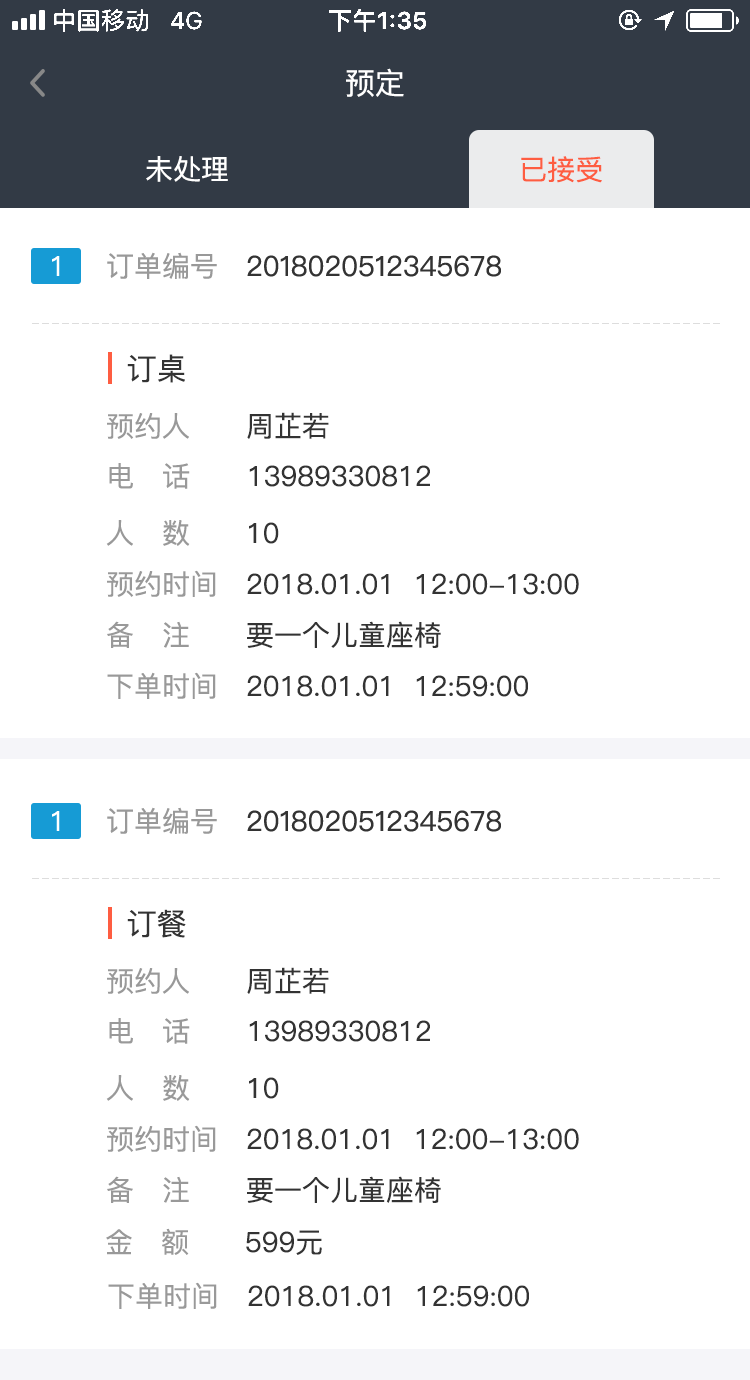
<style>
.page{position:relative;width:750px;height:1380px;background:#ffffff}
.page>*{position:absolute;margin:0}
.t1{font:30px "PingFang-SC-Medium";color:#ffffff}
.t2{font:28px "PingFang-SC-Medium";color:#ffffff}
.t3{font:28px "PingFang-SC-Medium";color:#fe5d41}
.t4{font:28px "PingFangSC-Regular";color:#ffffff}
.t5{font:28px "PingFangSC-Regular";color:#333333}
.t6{font:28px "PingFangSC-Regular";color:#999999}
.t7{font:30px "PingFang-SC-Medium";color:#333333}
.t8{font:28px/50px "PingFang-SC-Medium";color:#333333}
.t9{font:28px "PingFang-SC-Medium";color:#999999}
.t10{font:28px/50px "PingFang-SC-Medium";color:#999999}
.t11{font:28px "PingFang-SC-Medium";color:#333333}
</style>
<div class="page">
<p class="t1" style="left:346px;top:68px;width:58px;height:29px">预定</p>
<p class="t2" style="left:146px;top:156px;width:82px;height:26px">未处理</p>
<p class="t3" style="left:521px;top:156px;width:81px;height:27px">已接受</p>
<p class="t4" style="left:52px;top:256px;width:8px;height:20px">1</p>
<p class="t5" style="left:107px;top:252px;width:394px;height:27px"><span class="t6">订单编号   </span>2018020512345678</p>
<p class="t7" style="left:127px;top:354px;width:58px;height:29px">订桌</p>
<p class="t8" style="left:107px;top:412px;width:323px;height:77px"><span class="t9">     <br></span><span class="t10">预约人      </span>周芷若<br><span class="t10">电   话       </span>13989330812</p>
<p class="t9" style="left:106px;top:520px;width:173px;height:26px">人   数      <span class="t11">10</span></p>
<p class="t11" style="left:107px;top:570px;width:472px;height:27px"><span class="t9">预约时间   </span>2018.01.01  12:00-13:00</p>
<p class="t11" style="left:107px;top:621px;width:334px;height:27px"><span class="t9">备   注      </span>要一个儿童座椅</p>
<p class="t11" style="left:107px;top:672px;width:421px;height:27px"><span class="t9">下单时间   </span>2018.01.01  12:59:00</p>
<p class="t5" style="left:107px;top:807px;width:394px;height:27px"><span class="t6">订单编号   </span>2018020512345678</p>
<p class="t4" style="left:52px;top:811px;width:8px;height:20px">1</p>
<p class="t7" style="left:127px;top:909px;width:59px;height:29px">订餐</p>
<p class="t8" style="left:107px;top:967px;width:323px;height:77px"><span class="t9">     <br></span><span class="t10">预约人      </span>周芷若<br><span class="t10">电   话       </span>13989330812</p>
<p class="t9" style="left:106px;top:1075px;width:173px;height:26px">人   数      <span class="t11">10</span></p>
<p class="t11" style="left:107px;top:1125px;width:472px;height:27px"><span class="t9">预约时间   </span>2018.01.01  12:00-13:00</p>
<p class="t11" style="left:107px;top:1176px;width:334px;height:27px"><span class="t9">备   注      </span>要一个儿童座椅</p>
<p class="t9" style="left:106px;top:1228px;width:216px;height:27px">金   额      <span class="t11">599元</span></p>
<p class="t11" style="left:108px;top:1282px;width:421px;height:27px"><span class="t9">下单时间   </span>2018.01.01  12:59:00</p>
</div>
